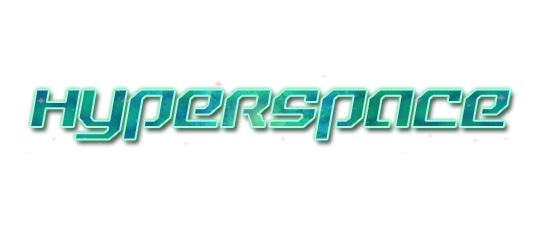
<style>
.page{position:relative;width:545px;height:234px;background:#ffffff}
.page>*{position:absolute;margin:0}
.t1{font:65px "RealityHyperRegular"}
</style>
<div class="page">
<p class="t1" style="left:30px;top:89px;width:481px;height:51px">Hyperspace</p>
</div>
